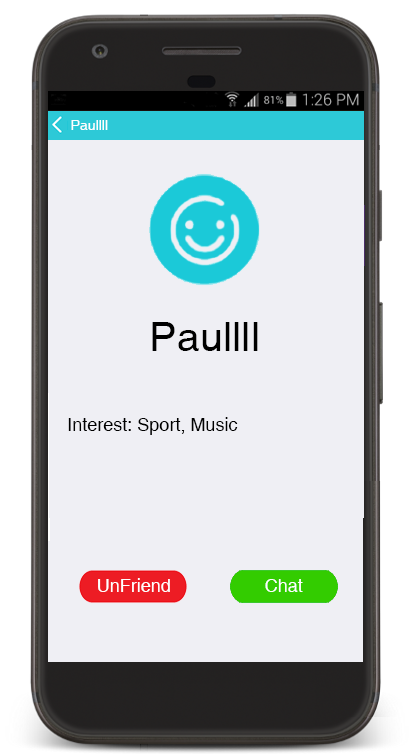
<style>
.page{position:relative;width:413px;height:754px;background:#efeff4}
.page>*{position:absolute;margin:0}
.t1{font:41.5px "Helvetica";color:#000000}
.t2{font:18px "Helvetica";color:#000000}
.t3{font:18px "Helvetica";color:#ffffff}
</style>
<div class="page">
<p class="t1" style="left:152px;top:322px;width:106px;height:29px">Paullll</p>
<p class="t2" style="left:68px;top:417px;width:170px;height:18px">Interest: Sport, Music</p>
<p class="t3" style="left:98px;top:578px;width:72px;height:14px">UnFriend</p>
<p class="t3" style="left:265px;top:579px;width:38px;height:13px">Chat</p>
</div>
